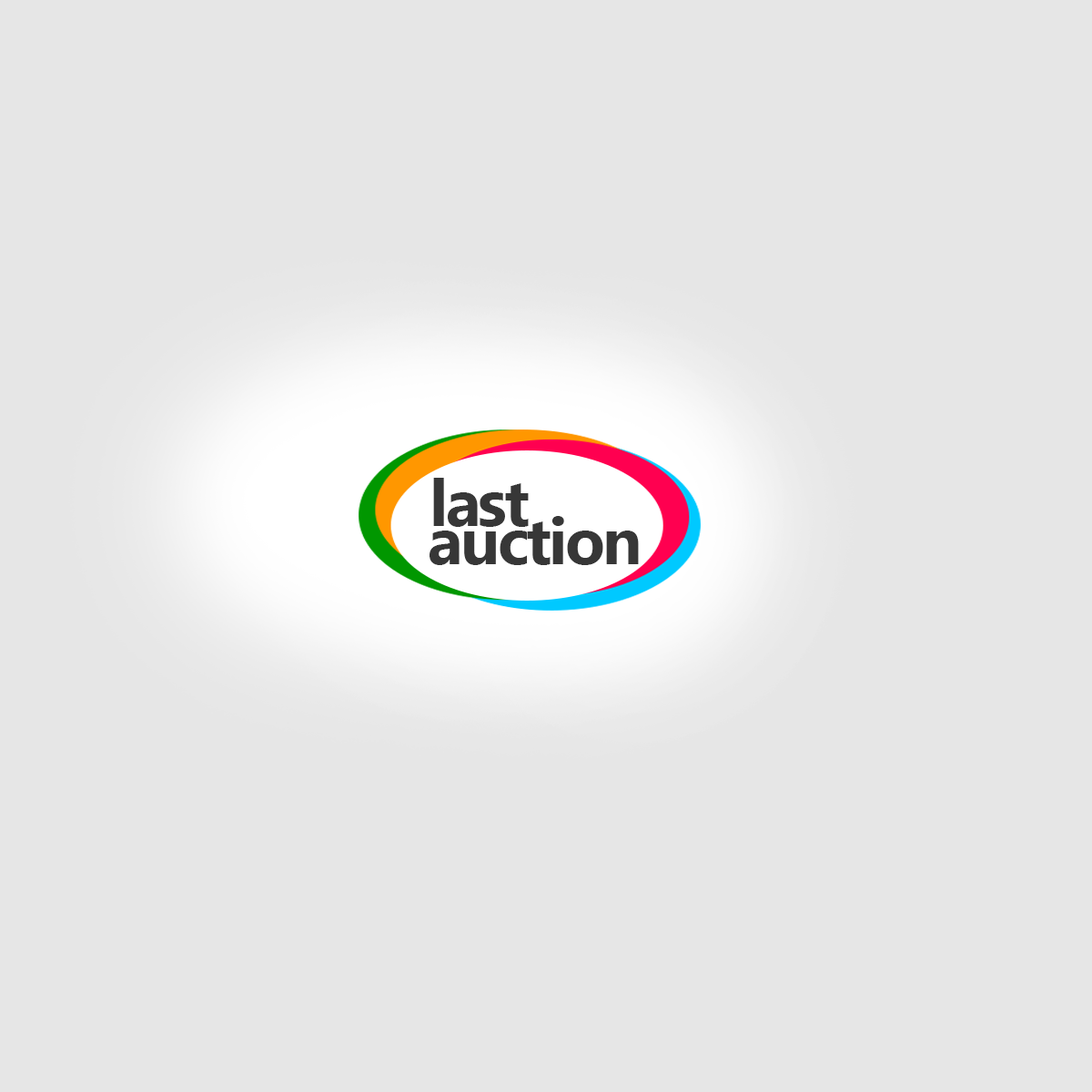
<style>
.page{position:relative;width:1092px;height:1092px;background:#e6e6e6}
.page>*{position:absolute;margin:0}
.t1{font:65.5px "Ebrima-Bold";letter-spacing:-0.04em;color:#373737}
</style>
<div class="page">
<p class="t1" style="left:433px;top:478px;width:96px;height:49px">last</p>
<p class="t1" style="left:430px;top:516px;width:209px;height:49px">auction</p>
</div>
